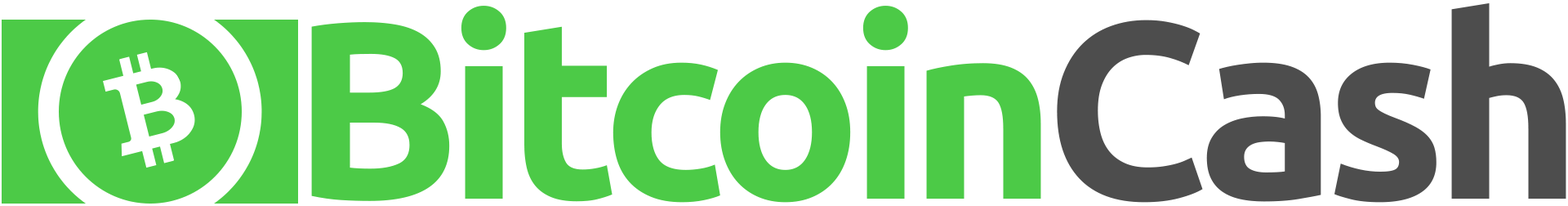
<style>
.page{position:relative;width:1568px;height:206px;background:#ffffff}
.page>*{position:absolute;margin:0}
.t1{font:251.5px "Ubuntu-Bold";letter-spacing:-0.05em;color:#4cca47}
.t2{font:251.5px "Ubuntu-Bold";letter-spacing:-0.05em;color:#4d4d4d}
</style>
<div class="page">
<p class="t1" style="left:311px;top:2px;width:1255px;height:201px">Bitcoin<span class="t2">Cash</span></p>
</div>
